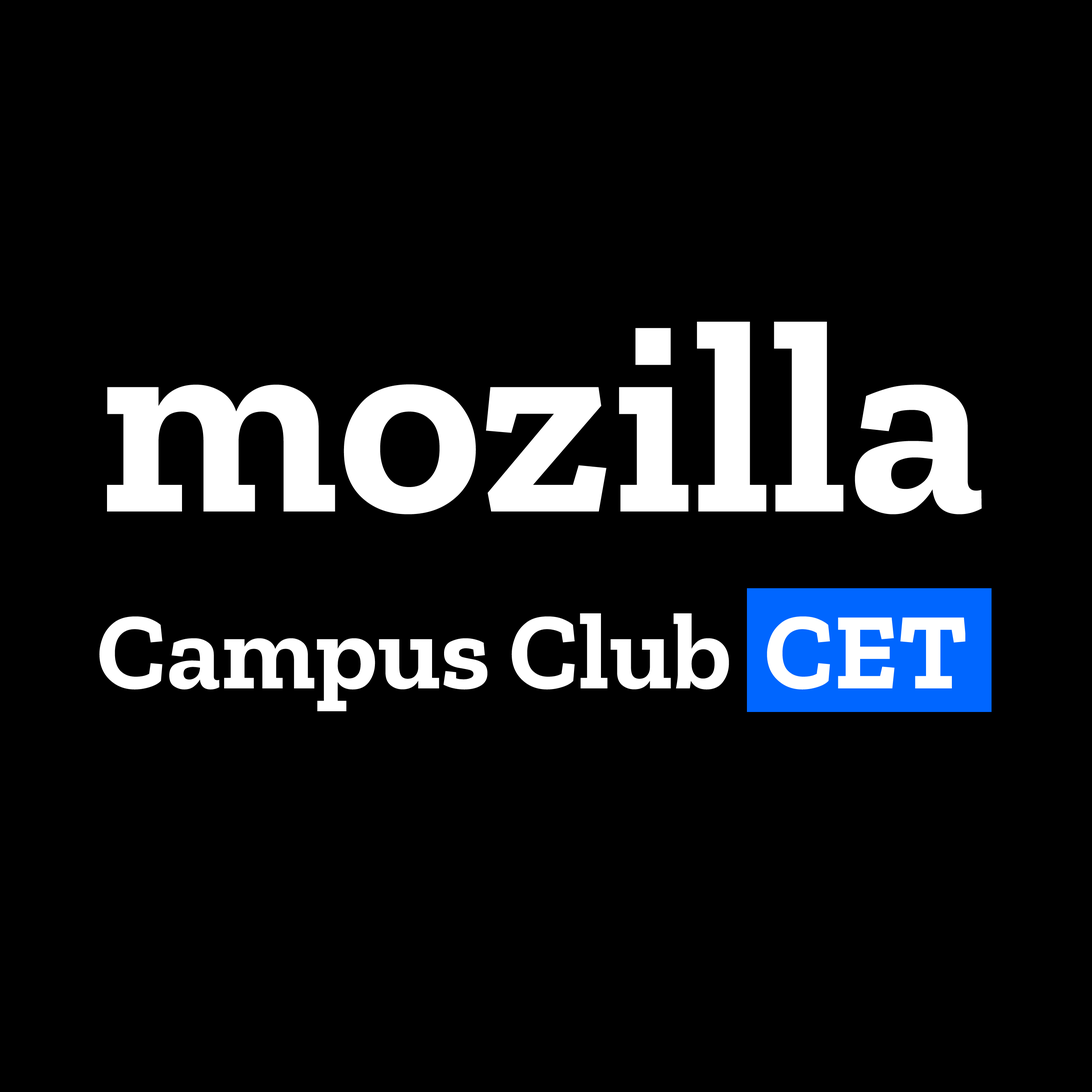
<style>
.page{position:relative;width:1092px;height:1092px;background:#000000}
.page>*{position:absolute;margin:0}
.t1{font:276px "ZillaSlabHighlight-Bold";color:#000000}
.t2{font:109.2px "ZillaSlabHighlight-Bold";color:#000000}
</style>
<div class="page">
<p class="t1" style="left:96px;top:258px;width:893px;height:312px">mozilla</p>
<p class="t2" style="left:95px;top:588px;width:637px;height:124px">Campus Club</p>
</div>
